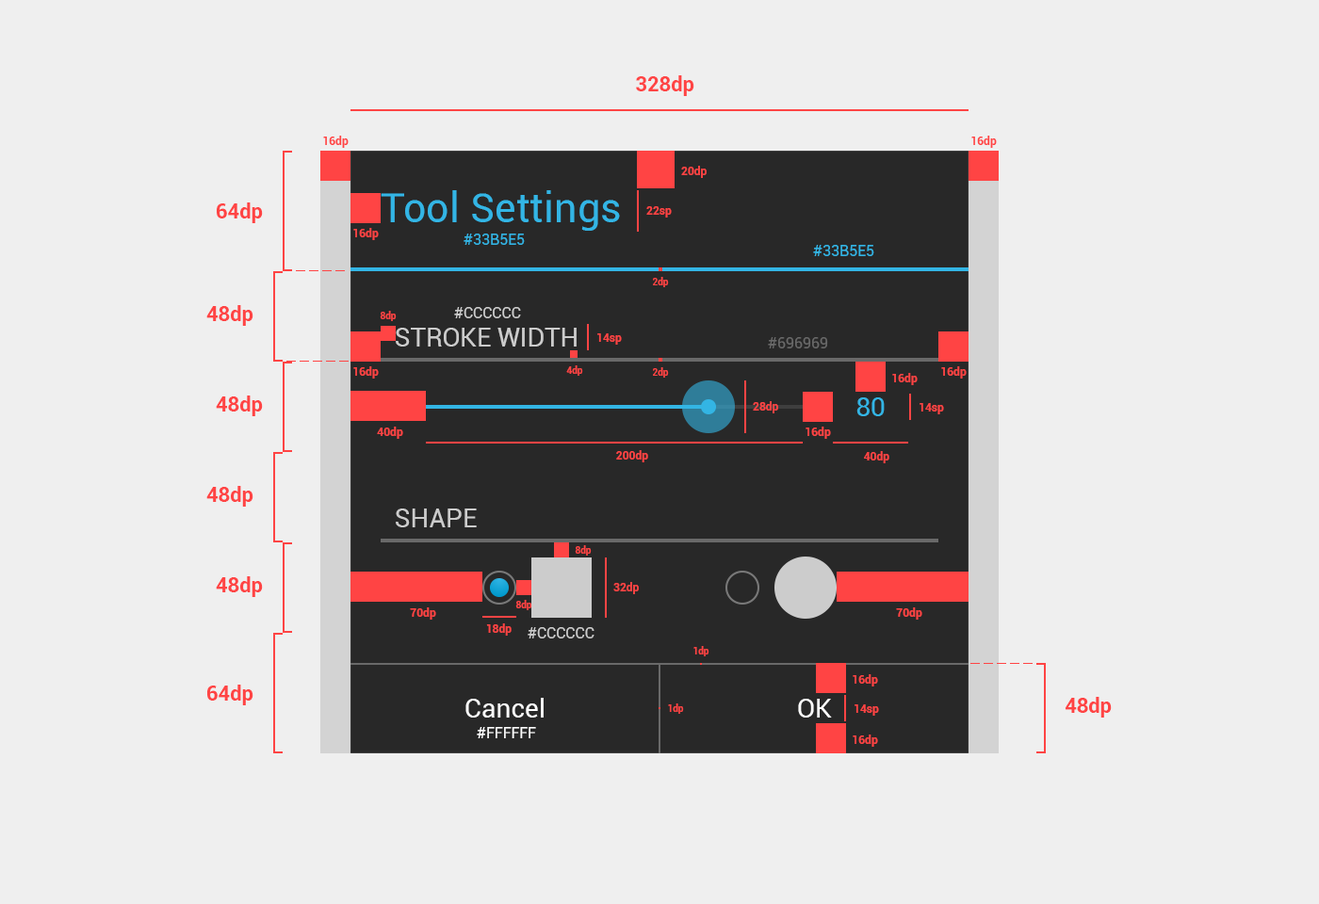
<style>
.page{position:relative;width:1319px;height:904px;background:#efefef}
.page>*{position:absolute;margin:0}
.t1{font:20.7px "Roboto-Bold";color:#ff4444}
.t2{font:11.3px "Roboto-Bold";color:#ff4444}
.t3{font:41.4px "Roboto-Regular";color:#33b5e5}
.t4{font:15.1px "Roboto-Regular";color:#33b5e5}
.t5{font:9.4px "Roboto-Bold";color:#ff4444}
.t6{font:15.1px "Roboto-Regular";color:#cccccc}
.t7{font:26.4px "Roboto-Regular";color:#cccccc}
.t8{font:15.1px "Roboto-Regular";color:#696969}
.t9{font:26.4px "Roboto-Regular";color:#33b5e5}
.t10{font:26.7px "Roboto-Regular";color:#cccccc}
.t11{font:26.8px "Roboto-Regular";color:#ffffff}
.t12{font:15.1px "Roboto-Regular";color:#fefefe}
</style>
<div class="page">
<p class="t1" style="left:636px;top:75px;width:58px;height:21px">328dp</p>
<p class="t2" style="left:323px;top:136px;width:26px;height:12px">16dp</p>
<p class="t2" style="left:971px;top:136px;width:26px;height:12px">16dp</p>
<p class="t2" style="left:681px;top:166px;width:25px;height:12px">20dp</p>
<p class="t3" style="left:381px;top:190px;width:239px;height:41px">Tool Settings</p>
<p class="t1" style="left:217px;top:203px;width:46px;height:20px">64dp</p>
<p class="t2" style="left:646px;top:206px;width:26px;height:12px">22sp</p>
<p class="t2" style="left:353px;top:228px;width:26px;height:12px">16dp</p>
<p class="t4" style="left:463px;top:234px;width:62px;height:11px">#33B5E5</p>
<p class="t4" style="left:813px;top:245px;width:61px;height:11px">#33B5E5</p>
<p class="t5" style="left:653px;top:277px;width:16px;height:10px">2dp</p>
<p class="t1" style="left:206px;top:305px;width:47px;height:21px">48dp</p>
<p class="t5" style="left:380px;top:311px;width:17px;height:10px">8dp</p>
<p class="t6" style="left:454px;top:307px;width:67px;height:11px">#CCCCCC</p>
<p class="t7" style="left:396px;top:328px;width:180px;height:19px">STROKE WIDTH</p>
<p class="t2" style="left:597px;top:333px;width:25px;height:12px">14sp</p>
<p class="t8" style="left:768px;top:337px;width:60px;height:12px">#696969</p>
<p class="t5" style="left:566px;top:365px;width:17px;height:11px">4dp</p>
<p class="t2" style="left:353px;top:366px;width:26px;height:13px">16dp</p>
<p class="t5" style="left:653px;top:367px;width:16px;height:11px">2dp</p>
<p class="t2" style="left:892px;top:373px;width:25px;height:12px">16dp</p>
<p class="t2" style="left:941px;top:366px;width:25px;height:13px">16dp</p>
<p class="t1" style="left:216px;top:396px;width:47px;height:20px">48dp</p>
<p class="t2" style="left:753px;top:401px;width:25px;height:13px">28dp</p>
<p class="t9" style="left:856px;top:397px;width:28px;height:19px">80</p>
<p class="t2" style="left:919px;top:403px;width:25px;height:11px">14sp</p>
<p class="t2" style="left:377px;top:427px;width:26px;height:12px">40dp</p>
<p class="t2" style="left:805px;top:427px;width:26px;height:12px">16dp</p>
<p class="t2" style="left:616px;top:450px;width:32px;height:12px">200dp</p>
<p class="t2" style="left:864px;top:451px;width:25px;height:12px">40dp</p>
<p class="t1" style="left:206px;top:486px;width:47px;height:21px">48dp</p>
<p class="t10" style="left:396px;top:509px;width:81px;height:18px">SHAPE</p>
<p class="t5" style="left:575px;top:545px;width:17px;height:11px">8dp</p>
<p class="t1" style="left:216px;top:576px;width:47px;height:21px">48dp</p>
<p class="t2" style="left:613px;top:582px;width:26px;height:12px">32dp</p>
<p class="t5" style="left:515px;top:600px;width:17px;height:10px">8dp</p>
<p class="t2" style="left:410px;top:608px;width:26px;height:12px">70dp</p>
<p class="t2" style="left:896px;top:608px;width:26px;height:12px">70dp</p>
<p class="t2" style="left:486px;top:624px;width:25px;height:12px">18dp</p>
<p class="t6" style="left:527px;top:627px;width:67px;height:12px">#CCCCCC</p>
<p class="t5" style="left:693px;top:646px;width:16px;height:11px">1dp</p>
<p class="t2" style="left:852px;top:674px;width:26px;height:13px">16dp</p>
<p class="t1" style="left:207px;top:685px;width:46px;height:21px">64dp</p>
<p class="t11" style="left:465px;top:698px;width:78px;height:20px">Cancel</p>
<p class="t11" style="left:798px;top:699px;width:34px;height:19px">OK</p>
<p class="t1" style="left:1064px;top:697px;width:47px;height:21px">48dp</p>
<p class="t5" style="left:668px;top:704px;width:16px;height:10px">1dp</p>
<p class="t2" style="left:854px;top:705px;width:25px;height:11px">14sp</p>
<p class="t12" style="left:477px;top:727px;width:59px;height:11px">#FFFFFF</p>
<p class="t2" style="left:852px;top:735px;width:26px;height:12px">16dp</p>
</div>
